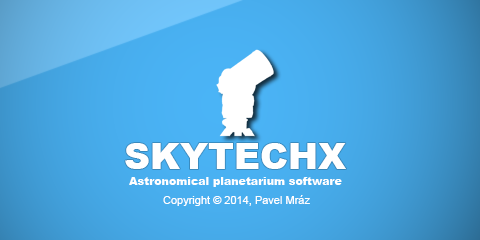
<style>
.page{position:relative;width:480px;height:240px}
.page>*{position:absolute;margin:0}
.t1{font:36px "Arial-Black";color:#ffffff}
.t2{font:11px "Arial-Black";color:#ffffff}
.t3{font:11px "ArialMT";color:#ffffff}
</style>
<div class="page">
<p class="t1" style="left:125px;top:143px;width:221px;height:26px">SKYTECHX</p>
<p class="t2" style="left:129px;top:177px;width:213px;height:10px">Astronomical planetarium software</p>
<p class="t3" style="left:163px;top:195px;width:147px;height:11px">Copyright © 2014, Pavel Mráz</p>
</div>
